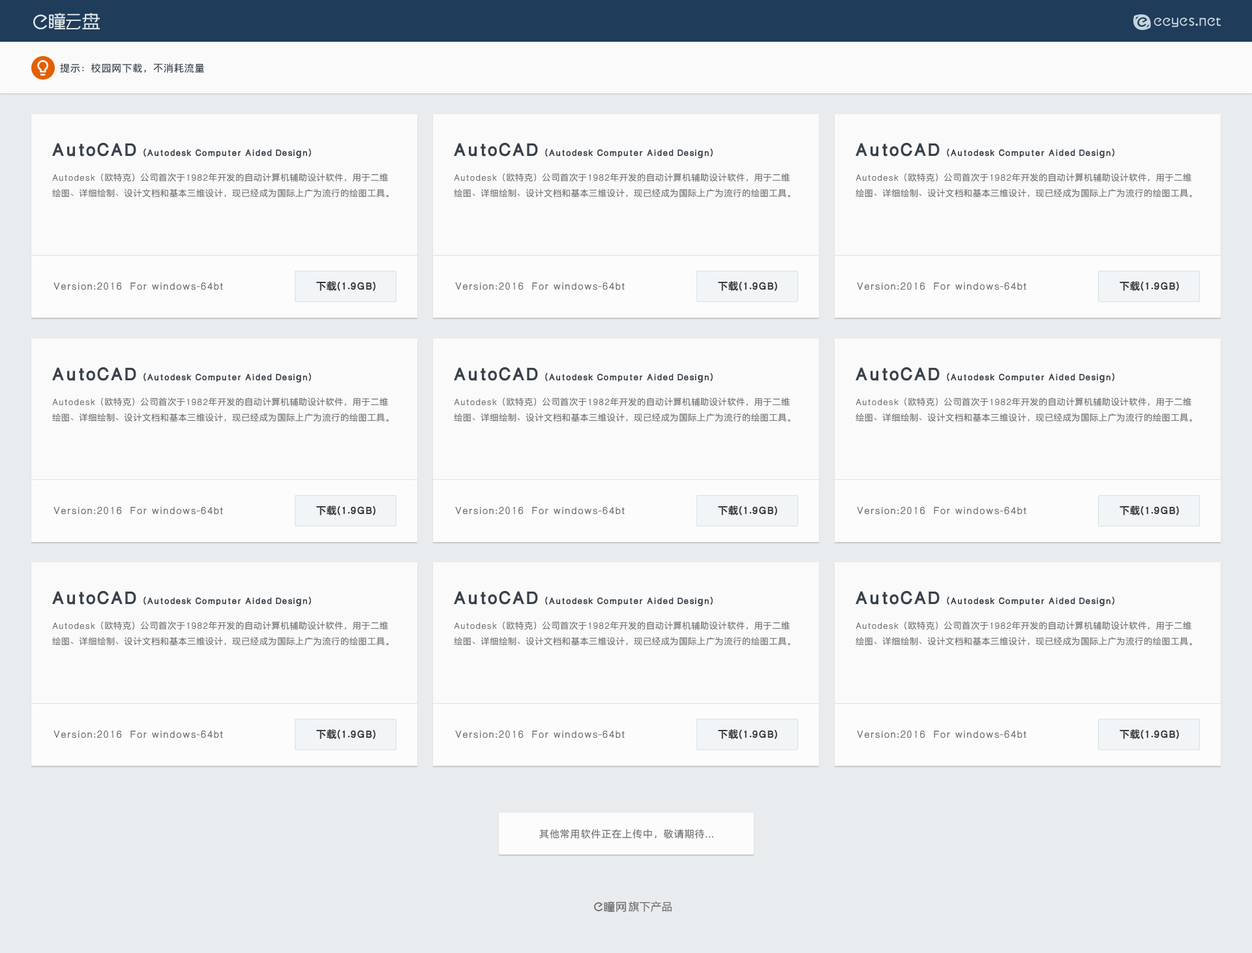
<style>
.page{position:relative;width:1252px;height:953px;background:#fafafa}
.page>*{position:absolute;margin:0}
.t1{font:11.7px "PingHei-Text";letter-spacing:0.05em;color:#38414b}
.t2{font:10.4px "PingHei-Bold";letter-spacing:0.05em;color:#38414b}
.t3{font:20.9px "PingHei-Bold";letter-spacing:0.05em;color:#38414b}
.t4{font:10.4px/15.6px "PingHei-Text";letter-spacing:0.05em;color:#737373}
.t5{font:11.7px "PingHei-Bold";letter-spacing:0.05em;color:#333333}
.t6{font:11.7px "PingHei-Text";letter-spacing:0.05em;color:#717171}
.t7{font:11.7px "PingHei-Text";letter-spacing:0.05em;color:#737373}
.t8{font:13px "PingHei-Text";letter-spacing:0.05em;color:#737373}
</style>
<div class="page">
<p class="t1" style="left:60px;top:63px;width:145px;height:10px">提示：校园网下载，不消耗流量</p>
<p class="t2" style="left:52px;top:143px;width:259px;height:15px"><span class="t3">AutoCAD</span>（Autodesk Computer Aided Design）</p>
<p class="t2" style="left:454px;top:143px;width:259px;height:15px"><span class="t3">AutoCAD</span>（Autodesk Computer Aided Design）</p>
<p class="t2" style="left:855px;top:143px;width:259px;height:15px"><span class="t3">AutoCAD</span>（Autodesk Computer Aided Design）</p>
<p class="t4" style="left:52px;top:173px;width:337px;height:25px">Autodesk（欧特克）公司首次于1982年开发的自动计算机辅助设计软件，用于二维绘图、详细绘制、设计文档和基本三维设计，现已经成为国际上广为流行的绘图工具。</p>
<p class="t4" style="left:454px;top:173px;width:336px;height:25px">Autodesk（欧特克）公司首次于1982年开发的自动计算机辅助设计软件，用于二维绘图、详细绘制、设计文档和基本三维设计，现已经成为国际上广为流行的绘图工具。</p>
<p class="t4" style="left:855px;top:173px;width:337px;height:25px">Autodesk（欧特克）公司首次于1982年开发的自动计算机辅助设计软件，用于二维绘图、详细绘制、设计文档和基本三维设计，现已经成为国际上广为流行的绘图工具。</p>
<p class="t5" style="left:316px;top:281px;width:60px;height:10px">下载(1.9GB)</p>
<p class="t5" style="left:718px;top:281px;width:59px;height:10px">下载(1.9GB)</p>
<p class="t5" style="left:1119px;top:281px;width:60px;height:10px">下载(1.9GB)</p>
<p class="t6" style="left:53px;top:282px;width:170px;height:8px">Version:2016  For windows-64bt</p>
<p class="t6" style="left:455px;top:282px;width:170px;height:8px">Version:2016  For windows-64bt</p>
<p class="t6" style="left:857px;top:282px;width:169px;height:8px">Version:2016  For windows-64bt</p>
<p class="t2" style="left:52px;top:367px;width:259px;height:16px"><span class="t3">AutoCAD</span>（Autodesk Computer Aided Design）</p>
<p class="t2" style="left:454px;top:367px;width:259px;height:16px"><span class="t3">AutoCAD</span>（Autodesk Computer Aided Design）</p>
<p class="t2" style="left:855px;top:367px;width:259px;height:16px"><span class="t3">AutoCAD</span>（Autodesk Computer Aided Design）</p>
<p class="t4" style="left:52px;top:397px;width:337px;height:25px">Autodesk（欧特克）公司首次于1982年开发的自动计算机辅助设计软件，用于二维绘图、详细绘制、设计文档和基本三维设计，现已经成为国际上广为流行的绘图工具。</p>
<p class="t4" style="left:454px;top:397px;width:336px;height:25px">Autodesk（欧特克）公司首次于1982年开发的自动计算机辅助设计软件，用于二维绘图、详细绘制、设计文档和基本三维设计，现已经成为国际上广为流行的绘图工具。</p>
<p class="t4" style="left:855px;top:397px;width:337px;height:25px">Autodesk（欧特克）公司首次于1982年开发的自动计算机辅助设计软件，用于二维绘图、详细绘制、设计文档和基本三维设计，现已经成为国际上广为流行的绘图工具。</p>
<p class="t6" style="left:53px;top:507px;width:170px;height:7px">Version:2016  For windows-64bt</p>
<p class="t5" style="left:316px;top:505px;width:60px;height:10px">下载(1.9GB)</p>
<p class="t6" style="left:455px;top:507px;width:170px;height:7px">Version:2016  For windows-64bt</p>
<p class="t5" style="left:718px;top:505px;width:59px;height:10px">下载(1.9GB)</p>
<p class="t6" style="left:857px;top:507px;width:169px;height:7px">Version:2016  For windows-64bt</p>
<p class="t5" style="left:1119px;top:505px;width:60px;height:10px">下载(1.9GB)</p>
<p class="t2" style="left:52px;top:591px;width:259px;height:15px"><span class="t3">AutoCAD</span>（Autodesk Computer Aided Design）</p>
<p class="t2" style="left:454px;top:591px;width:259px;height:15px"><span class="t3">AutoCAD</span>（Autodesk Computer Aided Design）</p>
<p class="t2" style="left:855px;top:591px;width:259px;height:15px"><span class="t3">AutoCAD</span>（Autodesk Computer Aided Design）</p>
<p class="t4" style="left:52px;top:621px;width:337px;height:24px">Autodesk（欧特克）公司首次于1982年开发的自动计算机辅助设计软件，用于二维绘图、详细绘制、设计文档和基本三维设计，现已经成为国际上广为流行的绘图工具。</p>
<p class="t4" style="left:454px;top:621px;width:336px;height:24px">Autodesk（欧特克）公司首次于1982年开发的自动计算机辅助设计软件，用于二维绘图、详细绘制、设计文档和基本三维设计，现已经成为国际上广为流行的绘图工具。</p>
<p class="t4" style="left:855px;top:621px;width:337px;height:24px">Autodesk（欧特克）公司首次于1982年开发的自动计算机辅助设计软件，用于二维绘图、详细绘制、设计文档和基本三维设计，现已经成为国际上广为流行的绘图工具。</p>
<p class="t6" style="left:53px;top:730px;width:170px;height:8px">Version:2016  For windows-64bt</p>
<p class="t5" style="left:316px;top:729px;width:60px;height:10px">下载(1.9GB)</p>
<p class="t7" style="left:455px;top:730px;width:170px;height:8px">Version:2016  For windows-64bt</p>
<p class="t5" style="left:718px;top:729px;width:59px;height:10px">下载(1.9GB)</p>
<p class="t6" style="left:857px;top:730px;width:169px;height:8px">Version:2016  For windows-64bt</p>
<p class="t5" style="left:1119px;top:729px;width:60px;height:10px">下载(1.9GB)</p>
<p class="t7" style="left:539px;top:829px;width:174px;height:9px">其他常用软件正在上传中，敬请期待...</p>
<p class="t8" style="left:629px;top:901px;width:43px;height:10px">旗下产品</p>
</div>
